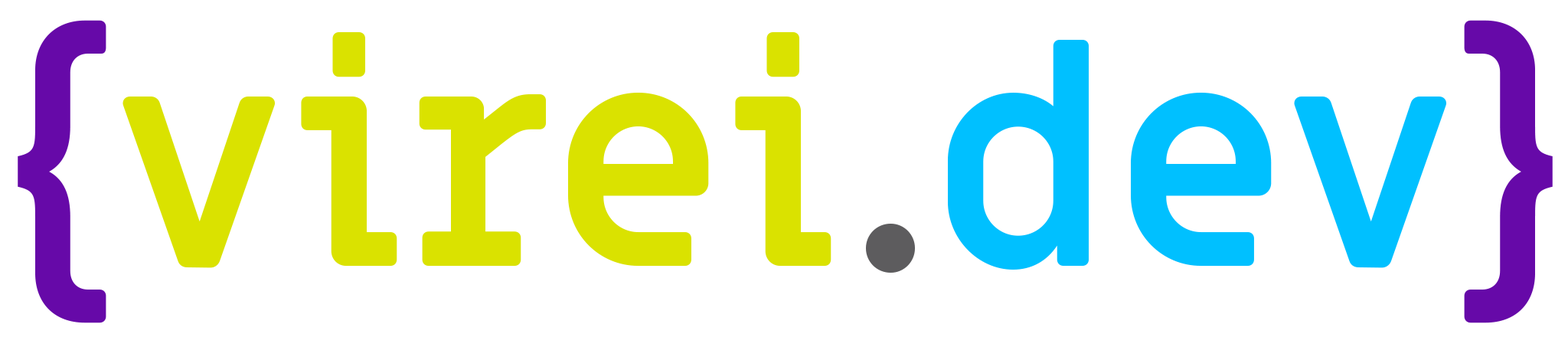
<style>
.page{position:relative;width:1568px;height:347px;background:#ffffff}
.page>*{position:absolute;margin:0}
.t1{font:295px "MiriamLibre-Bold";color:#dae200}
.t2{font:295px "MiriamLibre-Bold";color:#6609a8}
.t3{font:295px "MiriamLibre-Bold";color:#5d5c5e}
.t4{font:295px "MiriamLibre-Bold";color:#00c0ff}
</style>
<div class="page">
<p class="t1" style="left:18px;top:20px;width:1535px;height:303px"><span class="t2">{</span>virei<span class="t3">.</span><span class="t4">dev</span><span class="t2">}</span></p>
</div>
